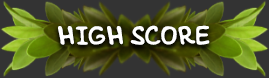
<style>
.page{position:relative;width:269px;height:78px;background:#333333}
.page>*{position:absolute;margin:0}
.t1{font:27.9px "Foma_flibustier";color:#ffffff}
</style>
<div class="page">
<p class="t1" style="left:58px;top:25px;width:152px;height:20px">HIGH SCORE</p>
</div>
